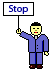
<style>
.page{position:relative;width:50px;height:70px;background:#ffffff}
.page>*{position:absolute;margin:0}
.t1{font:10px "MyriadPro-Regular";color:#000099}
</style>
<div class="page">
<p class="t1" style="left:8px;top:5px;width:20px;height:9px">Stop</p>
</div>
